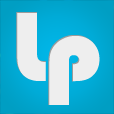
<style>
.page{position:relative;width:114px;height:114px;background:#eeeeee}
.page>*{position:absolute;margin:0}
.t1{font:102.9px "Bauhaus93";letter-spacing:-0.025em;color:#ffffff}
</style>
<div class="page">
<p class="t1" style="left:16px;top:12px;width:84px;height:93px">LP</p>
</div>
